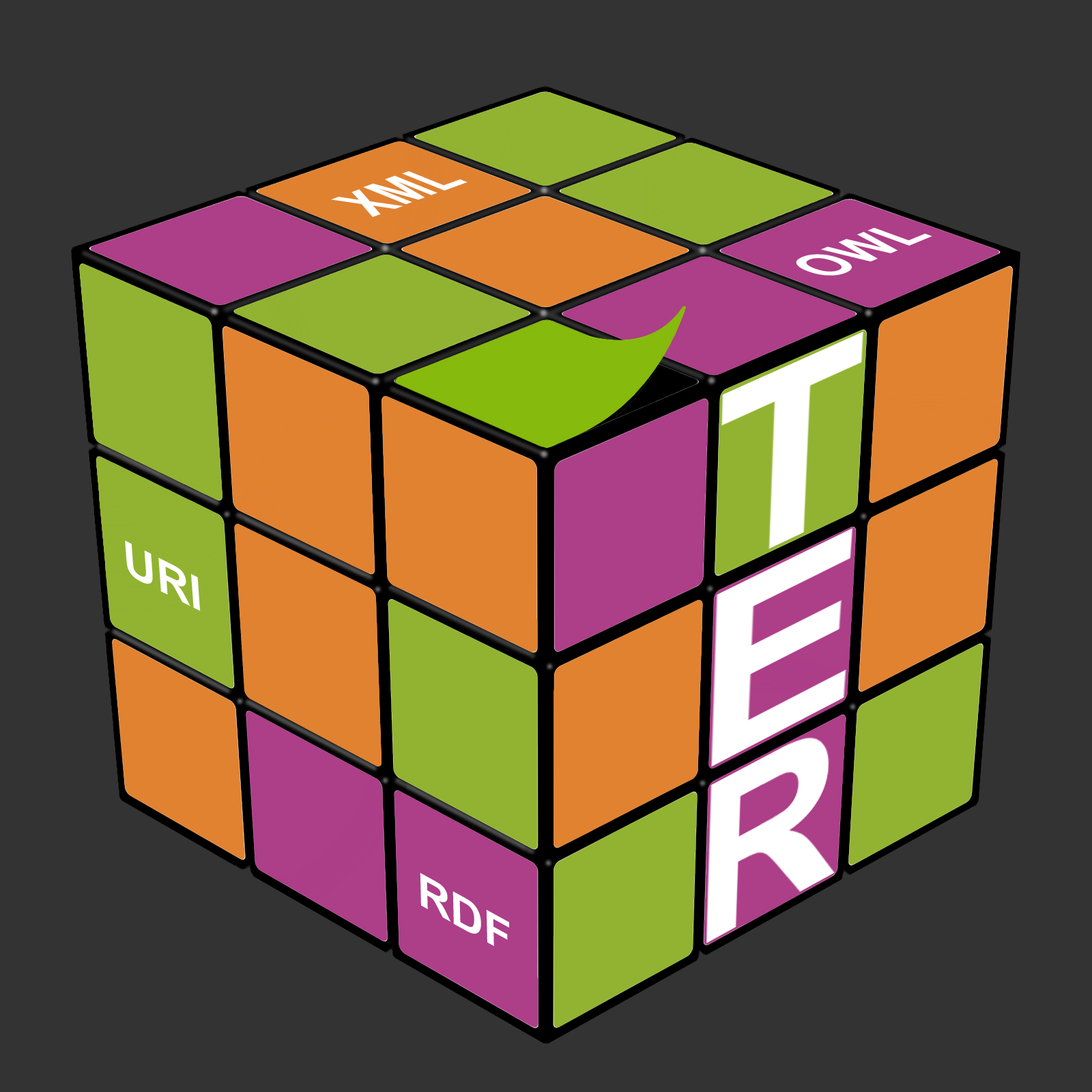
<style>
.page{position:relative;width:1092px;height:1092px;background:#333333}
.page>*{position:absolute;margin:0}
.t1{font:64.2px "Arial-BoldMT";color:#ffffff;scale:0.75 1}
.t2{font:62.4px "Arial-BoldMT";color:#ffffff;scale:0.79 1}
.t3{font:47.3px "Arial-BoldMT";color:#ffffff;scale:1.08 1}
.t4{font:45.5px "Arial-BoldMT";color:#ffffff;scale:1.16 1}
</style>
<div class="page">
<p class="t1" style="left:331px;top:171px;width:137px;height:46px;rotate:-20deg">XML</p>
<p class="t2" style="left:796px;top:227px;width:136px;height:49px;rotate:-22deg">OWL</p>
<p class="t3" style="left:125px;top:541px;width:76px;height:71px;rotate:27deg">URI</p>
<p class="t4" style="left:420px;top:873px;width:90px;height:73px;rotate:29deg">RDF</p>
</div>
